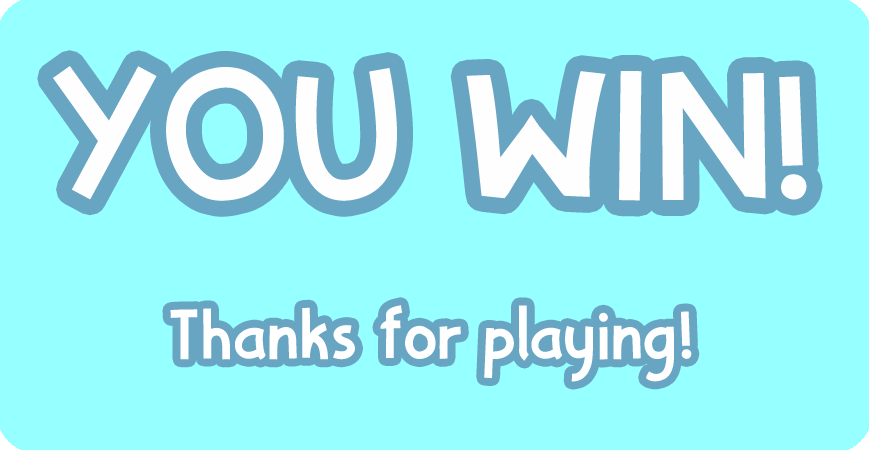
<style>
.page{position:relative;width:869px;height:450px;background:#96ffff}
.page>*{position:absolute;margin:0}
.t1{font:186.5px "Badaga";color:#fefefe}
.t2{font:72px "Badaga";color:#ffffff}
</style>
<div class="page">
<p class="t1" style="left:53px;top:66px;width:754px;height:135px">YOU WIN!</p>
<p class="t2" style="left:170px;top:305px;width:522px;height:77px">Thanks for playing!</p>
</div>
